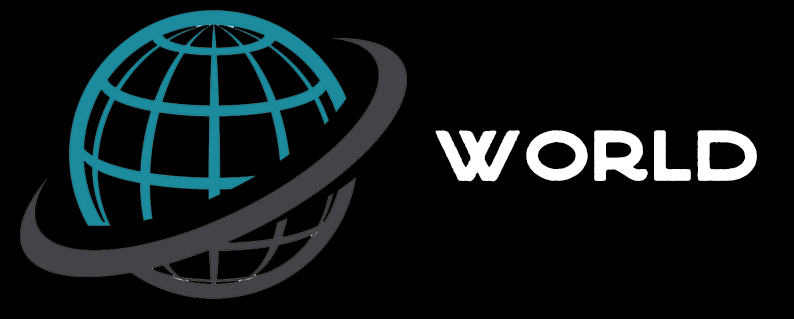
<style>
.page{position:relative;width:794px;height:319px;background:#000000}
.page>*{position:absolute;margin:0}
.t1{font:72px "Crafter-Rough";letter-spacing:0.01em;color:#ffffff}
</style>
<div class="page">
<p class="t1" style="left:435px;top:130px;width:322px;height:52px">world</p>
</div>
